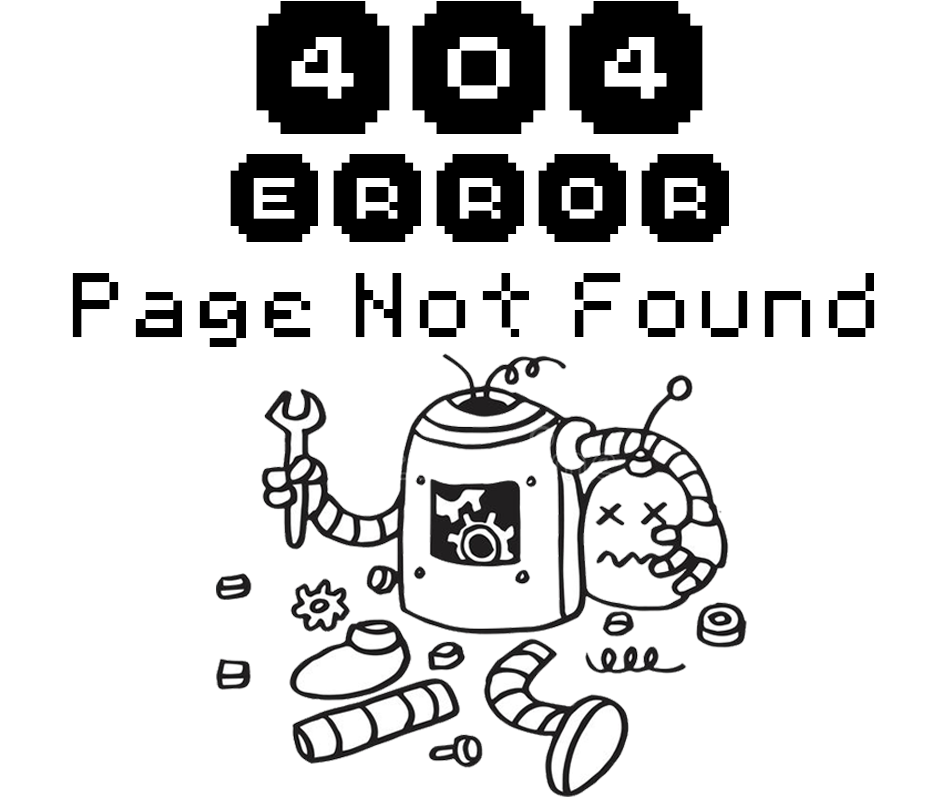
<style>
.page{position:relative;width:950px;height:800px;background:#ffffff}
.page>*{position:absolute;margin:0}
.t1{font:96.3px "FFFInterface06";color:#000000}
.t2{font:63.3px "FFFInterface06";color:#000000}
.t3{font:103.2px "00-Starmap-Truetype";color:#000000}
</style>
<div class="page">
<p class="t1" style="left:256px;top:1px;width:447px;height:133px">404</p>
<p class="t2" style="left:230px;top:154px;width:499px;height:88px">error</p>
<p class="t3" style="left:72px;top:273px;width:803px;height:74px">Page Not Found</p>
</div>
